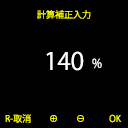
<style>
.page{position:relative;width:128px;height:128px;background:#000000}
.page>*{position:absolute;margin:0}
.t1{font:9px "KozGoPr6N-Regular";color:#ffff00}
.t2{font:23.8px "KozGoPr6N-Regular";color:#ffffff}
.t3{font:12.3px "KozGoPr6N-Regular";color:#ffffff;scale:0.95 1}
</style>
<div class="page">
<p class="t1" style="left:37px;top:10px;width:54px;height:9px">計算補正入力</p>
<p class="t2" style="left:46px;top:51px;width:38px;height:20px">140</p>
<p class="t3" style="left:92px;top:58px;width:10px;height:11px">%</p>
<p class="t1" style="left:5px;top:114px;width:117px;height:9px">R-取消　　⊕　　⊖　 　  OK</p>
</div>
